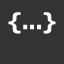
<style>
.page{position:relative;width:64px;height:64px;background:#333333}
.page>*{position:absolute;margin:0}
.t1{font:22px "Tahoma-Bold";color:#ffffff}
</style>
<div class="page">
<p class="t1" style="left:8px;top:12px;width:48px;height:22px">{...}</p>
</div>
